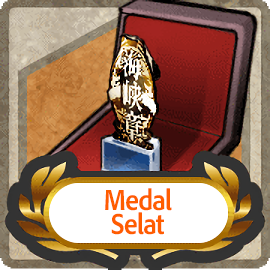
<style>
.page{position:relative;width:270px;height:270px}
.page>*{position:absolute;margin:0}
.t1{font:30px/24px "AdobeClean-Bold";letter-spacing:-0.04em;color:#ff5d00;scale:0.9 1}
</style>
<div class="page">
<p class="t1" style="left:105px;top:188px;width:67px;height:47px;text-align:center">Medal<br>Selat</p>
</div>
